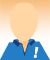
<style>
.page{position:relative;width:50px;height:60px;background:#ffd6a4}
.page>*{position:absolute;margin:0}
.t1{font:14px "HelveticaLTStd-BlkCond";color:#fefefe;text-transform:uppercase}
</style>
<div class="page">
<p class="t1" style="left:33px;top:46px;width:6px;height:12px;rotate:10deg">!</p>
</div>
